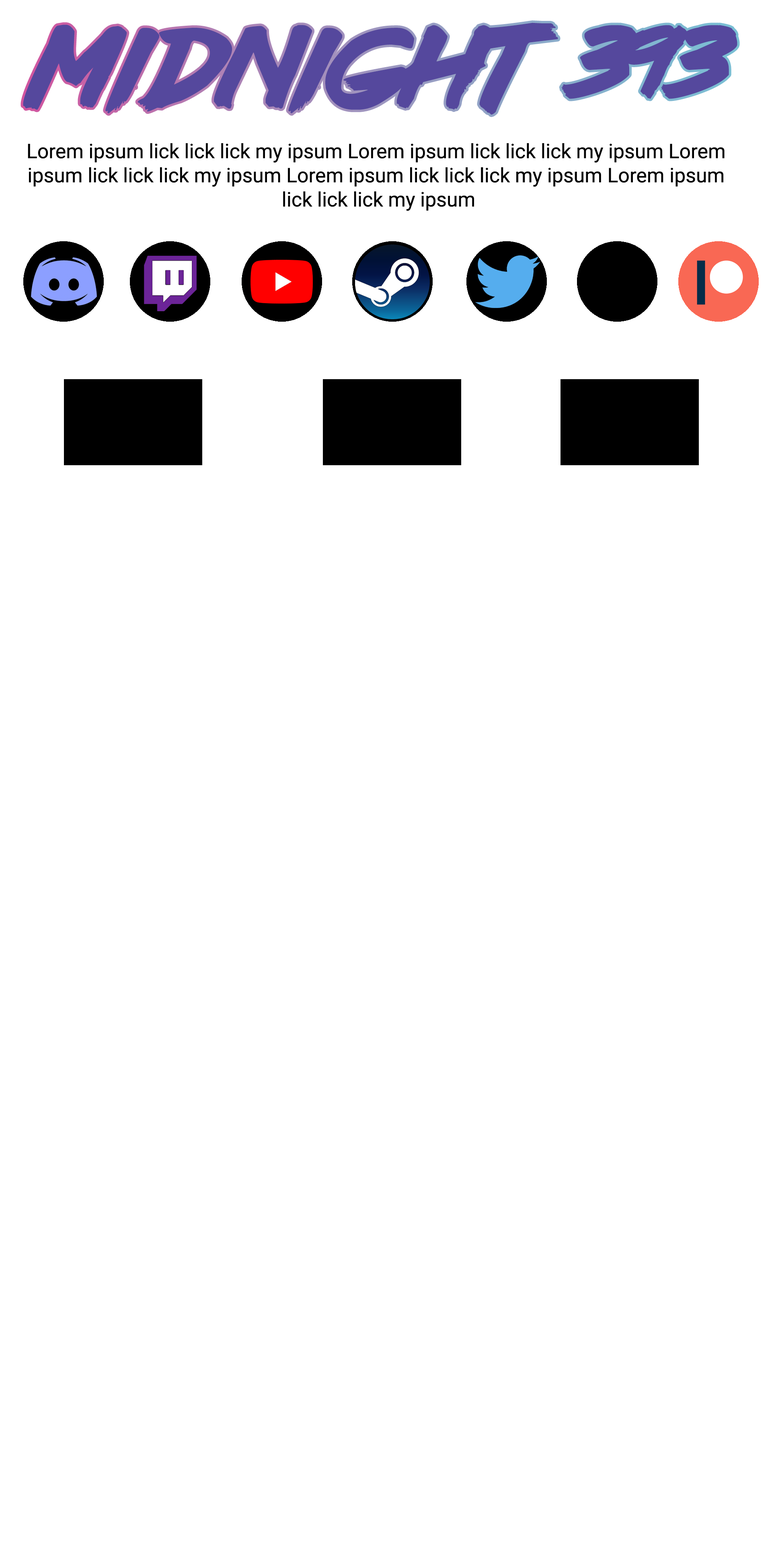
<style>
.page{position:relative;width:772px;height:1544px;background:#ffffff}
.page>*{position:absolute;margin:0}
.t1{font:100.5px "lazer84";color:#55489d}
.t2{font:20.1px "Roboto-Regular";color:#000000}
</style>
<div class="page">
<p class="t1" style="left:23px;top:23px;width:715px;height:92px">Midnight 393</p>
<p class="t2" style="left:28px;top:143px;width:697px;height:68px;text-align:center">Lorem ipsum lick lick lick my ipsum Lorem ipsum lick lick lick my ipsum Lorem <br>ipsum lick lick lick my ipsum Lorem ipsum lick lick lick my ipsum Lorem ipsum <br>lick lick lick my ipsum</p>
</div>
